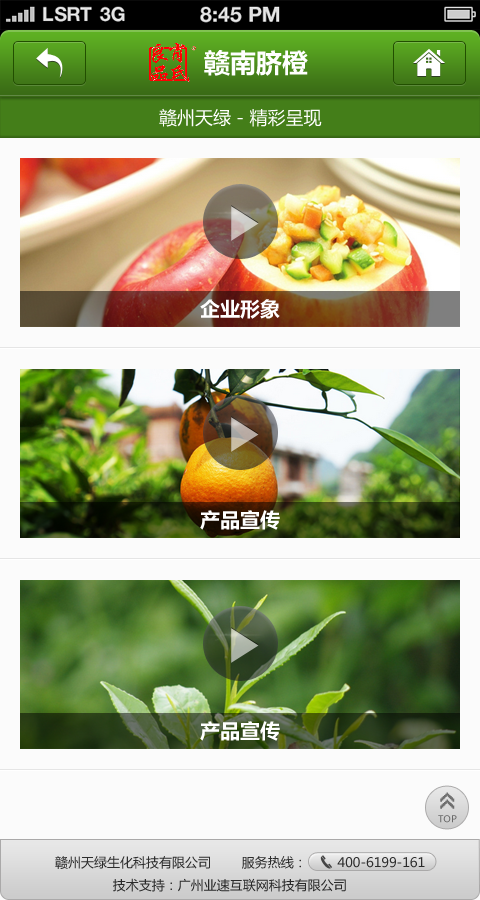
<style>
.page{position:relative;width:480px;height:900px;background:#fbfbfb}
.page>*{position:absolute;margin:0}
.t1{font:26px "MicrosoftYaHeiBold";color:#ffffff}
.t2{font:18px "MicrosoftYaHei";color:#ffffff}
.t3{font:20px "MicrosoftYaHeiBold";color:#ffffff}
.t4{font:26px "8514oem";letter-spacing:-0.2em;color:#6f6f6f;font-weight:bold}
.t5{font:9.3px "MicrosoftYaHei";color:#686868}
.t6{font:13px "MicrosoftYaHei";color:#2c2c2c}
</style>
<div class="page">
<p class="t1" style="left:204px;top:50px;width:104px;height:26px">赣南脐橙</p>
<p class="t2" style="left:159px;top:108px;width:163px;height:19px">赣州天绿 - 精彩呈现</p>
<p class="t3" style="left:200px;top:299px;width:80px;height:20px">企业形象</p>
<p class="t3" style="left:200px;top:510px;width:80px;height:20px">产品宣传</p>
<p class="t3" style="left:200px;top:721px;width:80px;height:20px">产品宣传</p>
<p class="t4" style="left:440px;top:792px;width:15px;height:17px;rotate:-90deg">&gt;&gt;</p>
<p class="t5" style="left:438px;top:815px;width:19px;height:8px">TOP</p>
<p class="t6" style="left:55px;top:856px;width:370px;height:36px">赣州天绿生化科技有限公司        服务热线：        400-6199-161<br>               技术支持：广州业速互联网科技有限公司</p>
</div>
